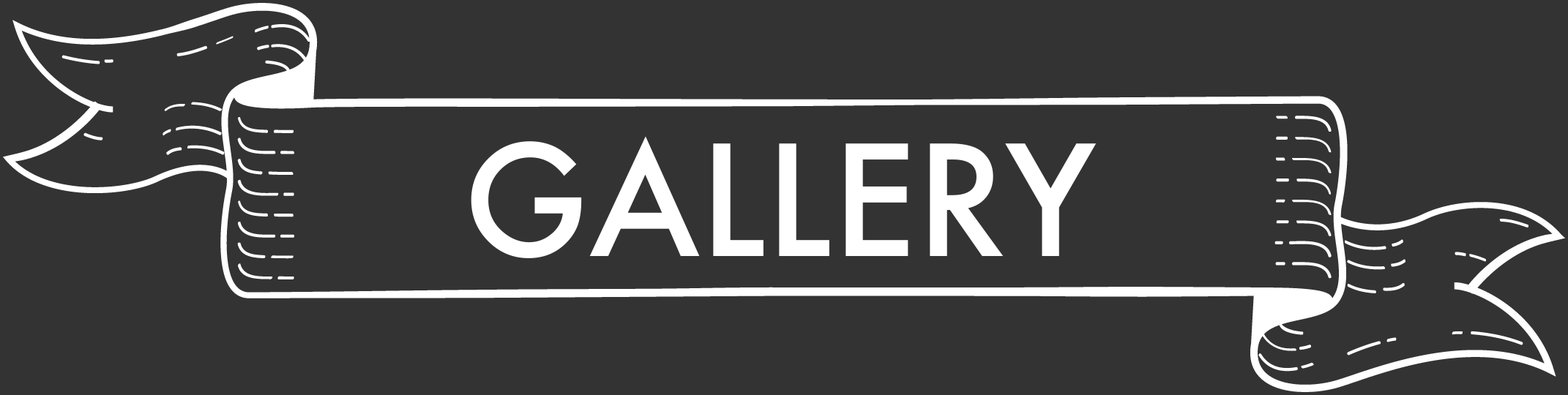
<style>
.page{position:relative;width:1568px;height:395px;background:#333333}
.page>*{position:absolute;margin:0}
.t1{font:149.2px "Futura-Medium";color:#ffffff}
</style>
<div class="page">
<p class="t1" style="left:471px;top:136px;width:626px;height:122px">GALLERY</p>
</div>
